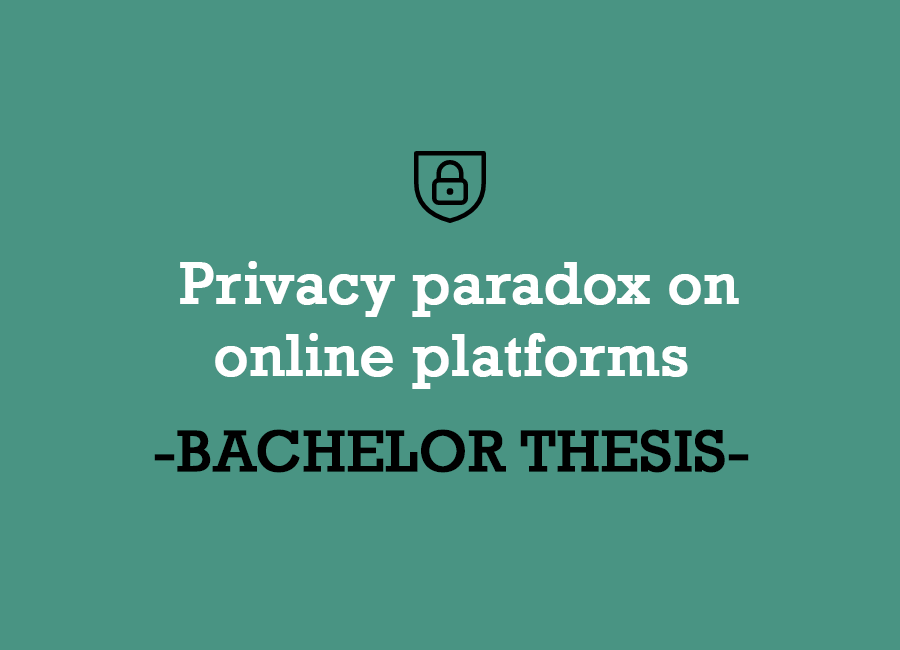
<style>
.page{position:relative;width:900px;height:650px;background:#499483}
.page>*{position:absolute;margin:0}
.t1{font:60px "Rockwell";color:#ffffff;font-weight:bold}
.t2{font:60px "Rockwell";color:#000000;font-weight:bold}
</style>
<div class="page">
<p class="t1" style="left:180px;top:261px;width:559px;height:128px;text-align:center">Privacy paradox on<br>online platforms</p>
<p class="t2" style="left:154px;top:429px;width:595px;height:44px">-BACHELOR THESIS-</p>
</div>
